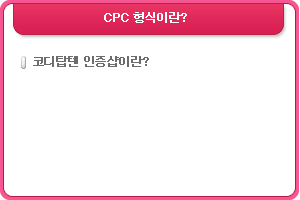
<style>
.page{position:relative;width:300px;height:200px;background:#ffffff}
.page>*{position:absolute;margin:0}
.t1{font:12px "Dotum";letter-spacing:-0.1em;color:#ffffff;font-weight:bold}
.t2{font:12px "Dotum";letter-spacing:-0.1em;color:#6c6c6c;font-weight:bold}
</style>
<div class="page">
<p class="t1" style="left:104px;top:12px;width:83px;height:11px">CPC 형식이란?</p>
<p class="t2" style="left:33px;top:56px;width:116px;height:11px">코디탑텐 인증샵이란?</p>
</div>
